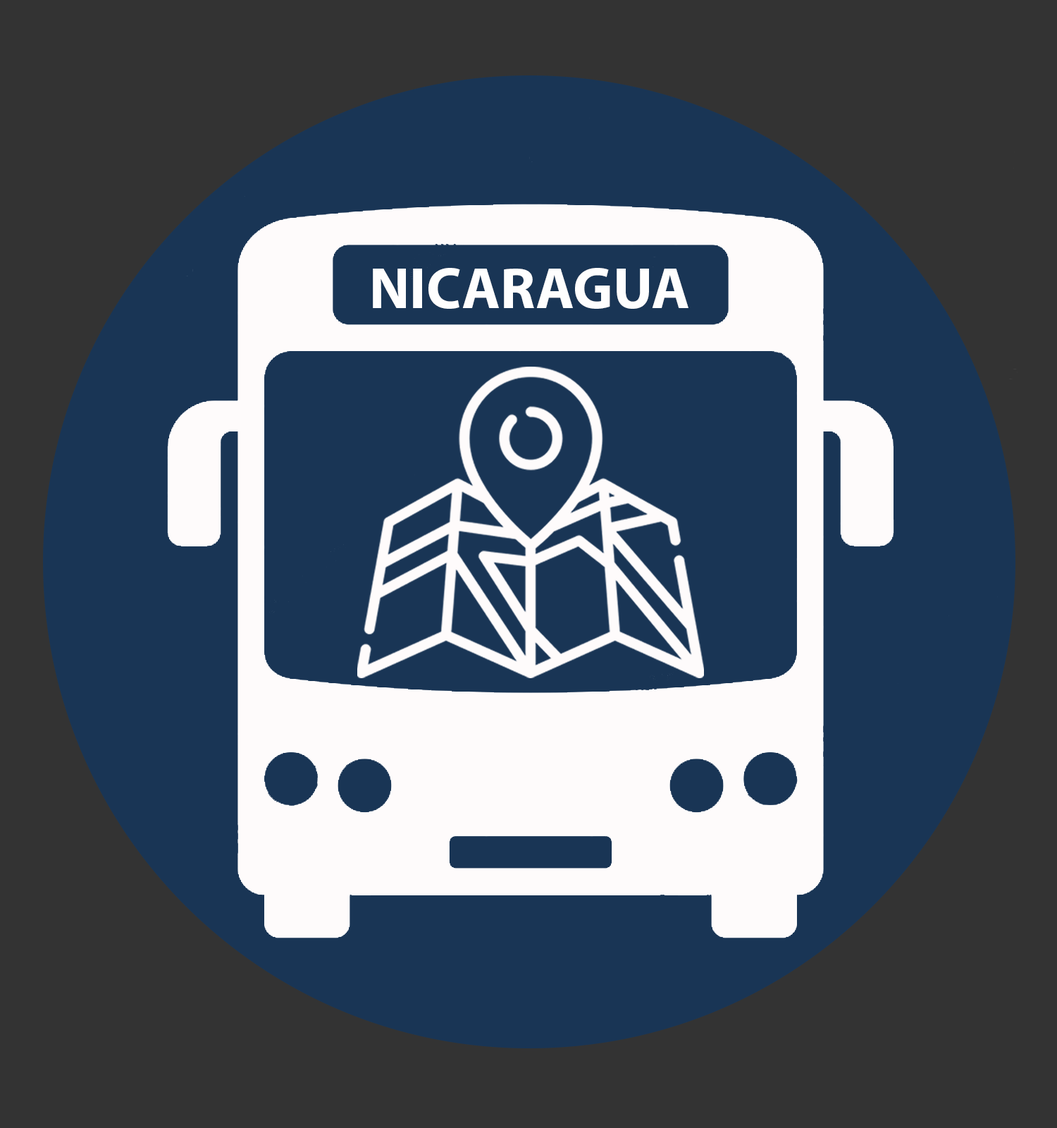
<style>
.page{position:relative;width:1057px;height:1128px;background:#193555}
.page>*{position:absolute;margin:0}
.t1{font:58.7px "MyriadPro-Bold";color:#fefefe}
</style>
<div class="page">
<p class="t1" style="left:373px;top:268px;width:316px;height:41px">NICARAGUA</p>
</div>
